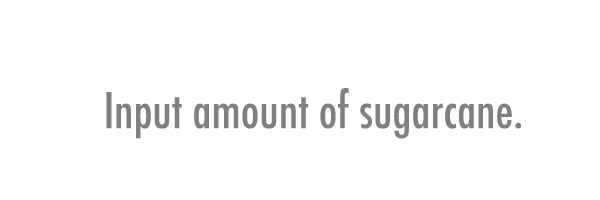
<style>
.page{position:relative;width:600px;height:200px;background:#ffffff}
.page>*{position:absolute;margin:0}
.t1{font:48px "Futura-CondensedMedium";color:#808080}
</style>
<div class="page">
<p class="t1" style="left:106px;top:88px;width:415px;height:51px">Input amount of sugarcane.</p>
</div>
